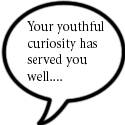
<style>
.page{position:relative;width:125px;height:125px;background:#ffffff}
.page>*{position:absolute;margin:0}
.t1{font:14px "Minion-Regular";color:#000000}
</style>
<div class="page">
<p class="t1" style="left:27px;top:21px;width:77px;height:60px">Your youthful curiosity has served you well....</p>
</div>
